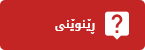
<style>
.page{position:relative;width:145px;height:50px;background:#c32525}
.page>*{position:absolute;margin:0}
.t1{font:11px "DroidArabicKufi-Bold";color:#ffffff}
</style>
<div class="page">
<p class="t1" style="left:55px;top:19px;width:40px;height:15px">ڕێنوێنی</p>
</div>
